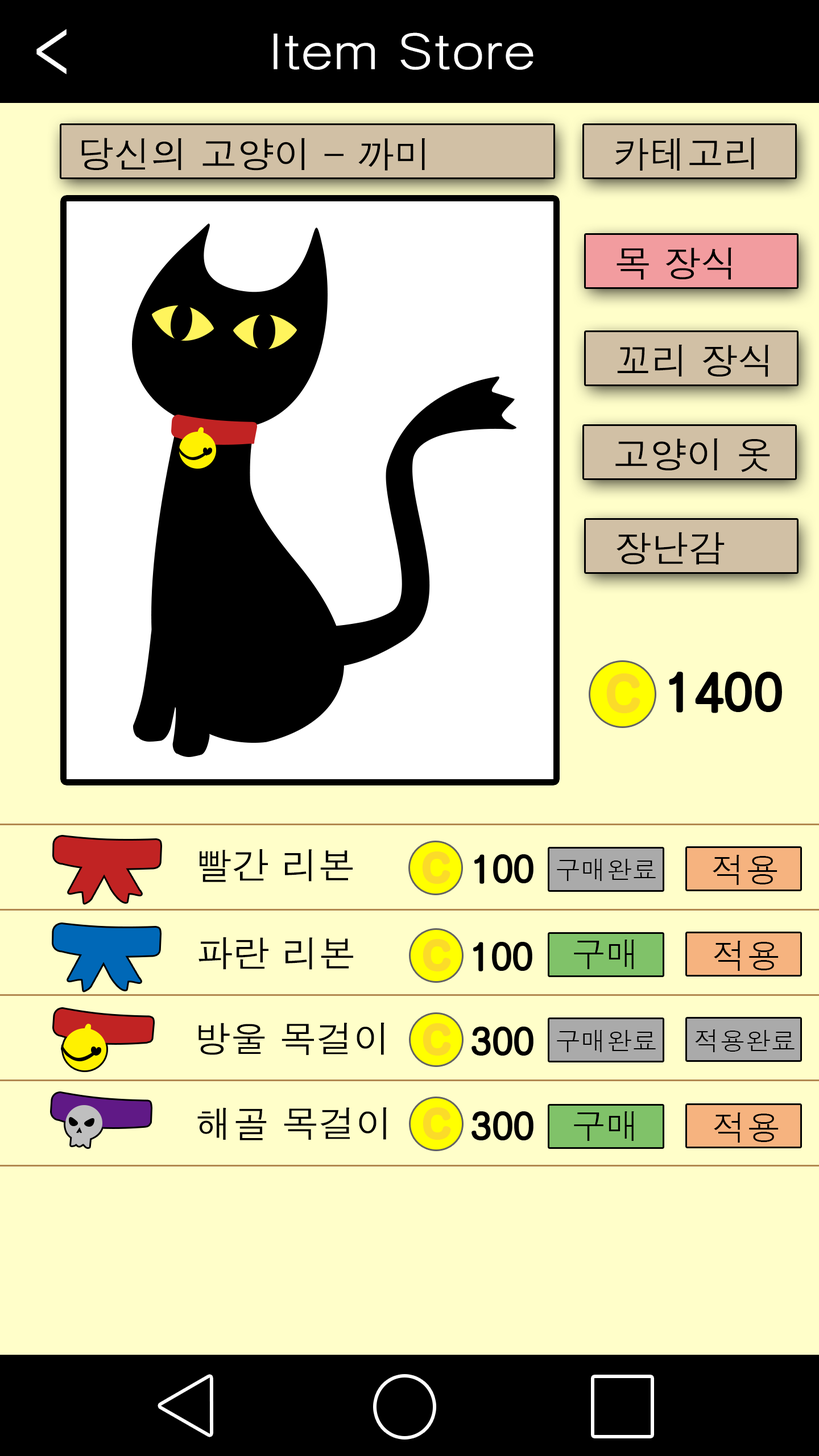
<style>
.page{position:relative;width:819px;height:1456px;background:#fffec9}
.page>*{position:absolute;margin:0}
.t1{font:77.3px "Haansoft-Dotum";color:#ffffff;scale:0.76 1}
.t2{font:49.6px "Haansoft-Dotum";color:#ffffff;scale:1.14 1}
.t3{font:37px "Haansoft-Dotum";color:#000000}
.t4{font:46.4px "Haansoft-Dotum";color:#fbdb29}
.t5{font:51.2px "Haansoft-Dotum";color:#000000}
.t6{font:37px "Haansoft-Dotum";color:#fbdb29}
.t7{font:34.1px "Haansoft-Dotum";color:#000000}
.t8{font:25.6px "Haansoft-Dotum";color:#000000}
</style>
<div class="page">
<p class="t1" style="left:36px;top:29px;width:31px;height:46px">&lt;</p>
<p class="t2" style="left:274px;top:32px;width:259px;height:38px">Item Store</p>
<p class="t3" style="left:81px;top:138px;width:344px;height:33px">당신의 고양이 - 까미</p>
<p class="t3" style="left:615px;top:138px;width:139px;height:33px">카테고리</p>
<p class="t3" style="left:617px;top:247px;width:114px;height:33px">목 장식</p>
<p class="t3" style="left:617px;top:345px;width:151px;height:32px">꼬리 장식</p>
<p class="t3" style="left:615px;top:438px;width:155px;height:34px">고양이 옷</p>
<p class="t3" style="left:617px;top:532px;width:108px;height:33px">장난감</p>
<p class="t4" style="left:609px;top:676px;width:29px;height:34px">C</p>
<p class="t5" style="left:671px;top:673px;width:109px;height:38px">1400</p>
<p class="t3" style="left:200px;top:849px;width:153px;height:33px">빨간 리본</p>
<p class="t6" style="left:425px;top:854px;width:23px;height:27px">C</p>
<p class="t3" style="left:475px;top:855px;width:57px;height:28px">100</p>
<p class="t7" style="left:713px;top:855px;width:64px;height:30px">적용</p>
<p class="t8" style="left:557px;top:859px;width:99px;height:22px">구매완료</p>
<p class="t3" style="left:198px;top:937px;width:155px;height:33px">파란 리본</p>
<p class="t6" style="left:425px;top:942px;width:23px;height:27px">C</p>
<p class="t7" style="left:574px;top:940px;width:60px;height:29px">구매</p>
<p class="t7" style="left:714px;top:941px;width:65px;height:30px">적용</p>
<p class="t3" style="left:474px;top:943px;width:57px;height:27px">100</p>
<p class="t3" style="left:198px;top:1023px;width:186px;height:32px">방울 목걸이</p>
<p class="t6" style="left:425px;top:1026px;width:23px;height:27px">C</p>
<p class="t3" style="left:473px;top:1028px;width:59px;height:26px">300</p>
<p class="t8" style="left:557px;top:1030px;width:99px;height:22px">구매완료</p>
<p class="t8" style="left:695px;top:1029px;width:100px;height:23px">적용완료</p>
<p class="t3" style="left:197px;top:1107px;width:190px;height:33px">해골 목걸이</p>
<p class="t6" style="left:425px;top:1110px;width:23px;height:27px">C</p>
<p class="t3" style="left:473px;top:1112px;width:59px;height:27px">300</p>
<p class="t7" style="left:574px;top:1111px;width:60px;height:30px">구매</p>
<p class="t7" style="left:714px;top:1112px;width:65px;height:31px">적용</p>
</div>
